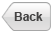
<style>
.page{position:relative;width:51px;height:32px;background:#ffffff}
.page>*{position:absolute;margin:0}
.t1{font:12px "Arial-BoldMT";color:#444343}
</style>
<div class="page">
<p class="t1" style="left:14px;top:12px;width:29px;height:9px">Back</p>
</div>
